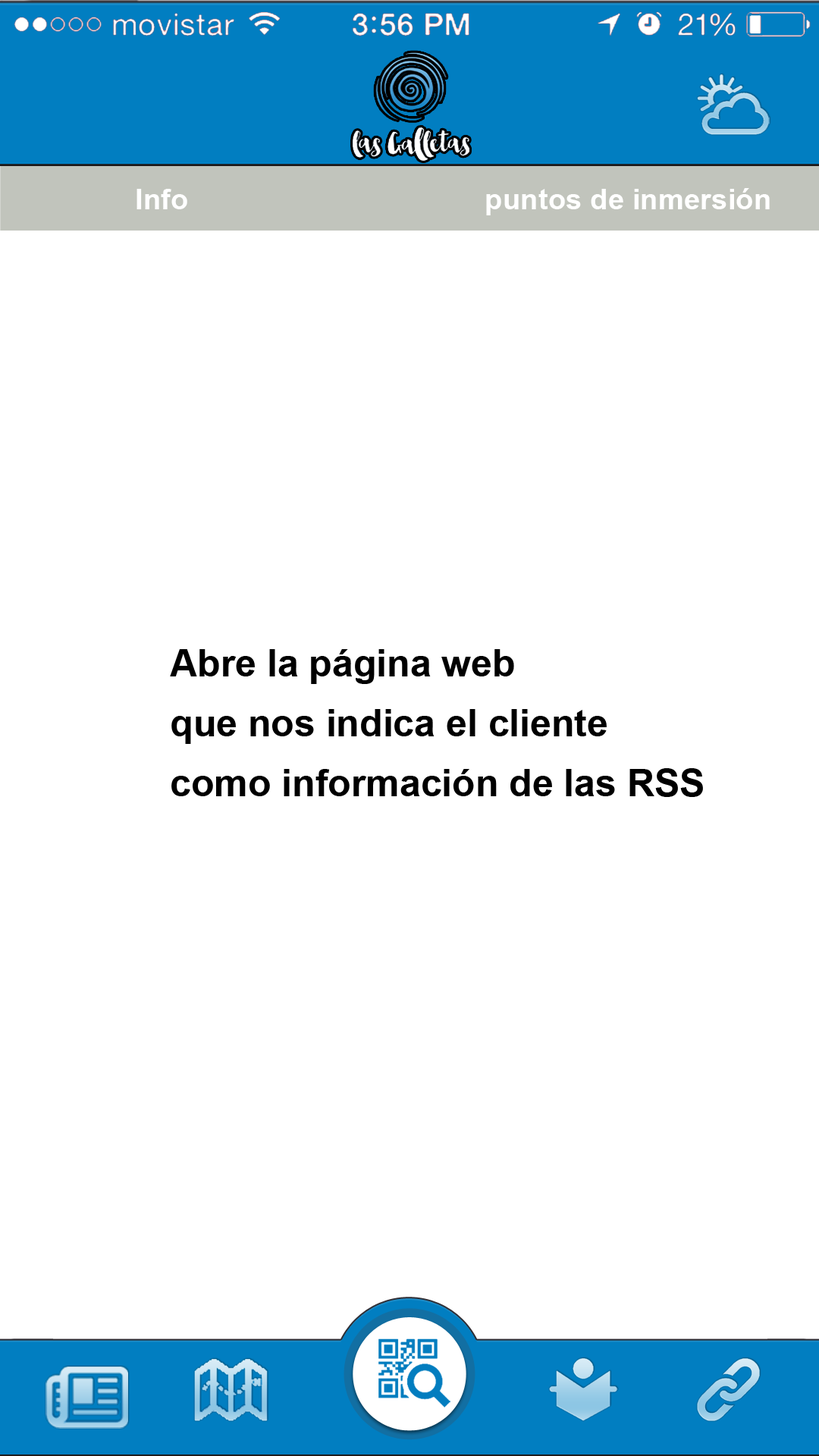
<style>
.page{position:relative;width:819px;height:1456px;background:#ffffff}
.page>*{position:absolute;margin:0}
.t1{font:29.1px "Arial-BoldMT";color:#ffffff}
.t2{font:37.9px/60px "Arial-BoldMT";color:#000000}
</style>
<div class="page">
<p class="t1" style="left:136px;top:189px;width:51px;height:20px">Info</p>
<p class="t1" style="left:486px;top:188px;width:284px;height:27px">puntos de inmersión</p>
<p class="t2" style="left:170px;top:649px;width:533px;height:148px">Abre la página web<br>que nos indica el cliente<br>como información de las RSS</p>
</div>
